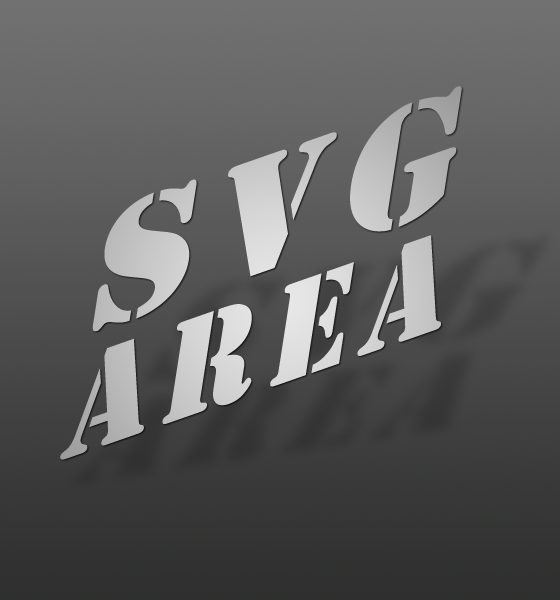
<style>
.page{position:relative;width:560px;height:600px}
.page>*{position:absolute;margin:0}
.t1{font:154.2px/126.4px "Stencil";letter-spacing:0.1em;color:#d0d0d0;scale:0.93 1}
.t2{font:184.5px/126.4px "Stencil";letter-spacing:0.1em;color:#d0d0d0;scale:1.07 1}
</style>
<div class="page">
<p class="t1" style="left:60px;top:86px;width:402px;height:374px;text-align:center;rotate:-19deg"><span class="t2">SVG<br></span>area</p>
</div>
